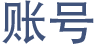
<style>
.page{position:relative;width:96px;height:46px;background:#ffffff}
.page>*{position:absolute;margin:0}
.t1{font:48px "AdobeHeitiStd-Regular";color:#40537b}
</style>
<div class="page">
<p class="t1" style="left:2px;top:0px;width:92px;height:44px">账号</p>
</div>
